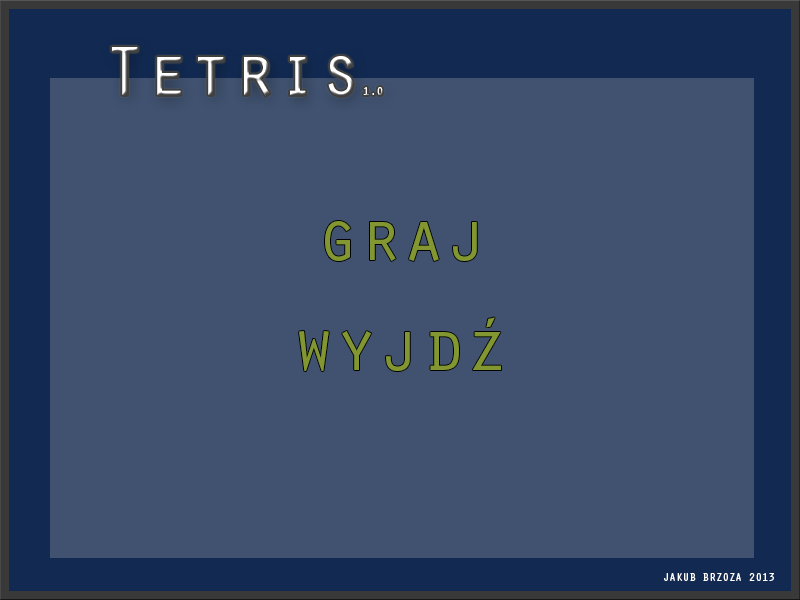
<style>
.page{position:relative;width:800px;height:600px;background:#405270}
.page>*{position:absolute;margin:0}
.t1{font:72px "OratorStd";color:#ffffff}
.t2{font:12px "OratorStd";color:#ffffff}
.t3{font:72px "OratorStd";color:#839732}
.t4{font:11px "OratorStd";color:#ffffff}
</style>
<div class="page">
<p class="t1" style="left:112px;top:47px;width:271px;height:49px">Tetris<span class="t2">1.0</span></p>
<p class="t3" style="left:325px;top:221px;width:152px;height:40px">graj</p>
<p class="t3" style="left:299px;top:331px;width:202px;height:40px">wyjdz</p>
<p class="t4" style="left:664px;top:573px;width:110px;height:8px">JAKUB BRZOZA 2013</p>
</div>
